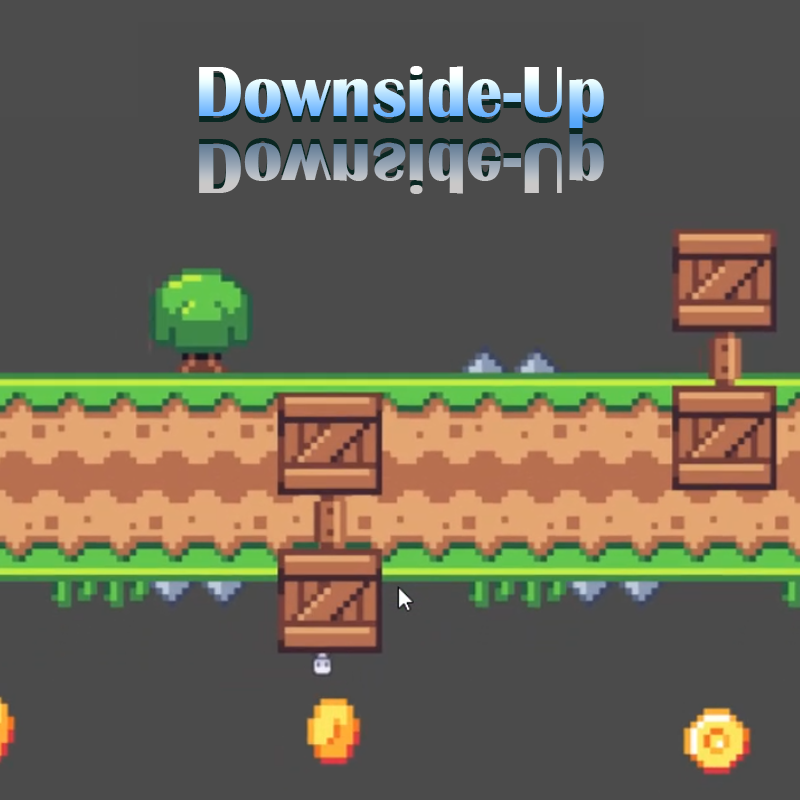
<style>
.page{position:relative;width:800px;height:800px;background:#4b4b4b}
.page>*{position:absolute;margin:0}
.t1{font:73px "BritannicBold"}
</style>
<div class="page">
<p class="t1" style="left:199px;top:66px;width:405px;height:62px">Downside-Up</p>
<p class="t1" style="left:199px;top:132px;width:405px;height:62px">Downside-Up</p>
</div>
